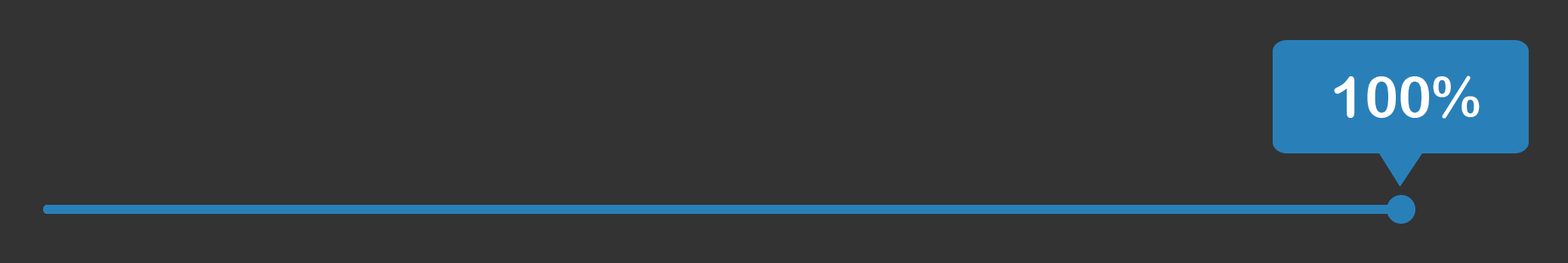
<style>
.page{position:relative;width:1568px;height:263px;background:#333333}
.page>*{position:absolute;margin:0}
.t1{font:56.6px "ArialRoundedMTBold";color:#ffffff}
</style>
<div class="page">
<p class="t1" style="left:1334px;top:76px;width:146px;height:43px">100%</p>
</div>
